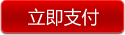
<style>
.page{position:relative;width:125px;height:35px}
.page>*{position:absolute;margin:0}
.t1{font:18px "MicrosoftYaHei";color:#ffffff;text-transform:uppercase}
</style>
<div class="page">
<p class="t1" style="left:28px;top:8px;width:71px;height:18px">立即支付</p>
</div>
